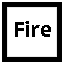
<style>
.page{position:relative;width:64px;height:64px;background:#ffffff}
.page>*{position:absolute;margin:0}
.t1{font:20.8px "OpenSans-Bold";letter-spacing:-0.005em;color:#000000}
</style>
<div class="page">
<p class="t1" style="left:15px;top:21px;width:36px;height:16px">Fire</p>
</div>
